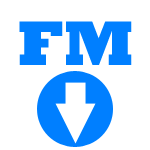
<style>
.page{position:relative;width:150px;height:150px;background:#ffffff}
.page>*{position:absolute;margin:0}
.t1{font:64px "Rockwell-ExtraBold";color:#007fff}
</style>
<div class="page">
<p class="t1" style="left:19px;top:21px;width:113px;height:44px">FM</p>
</div>
